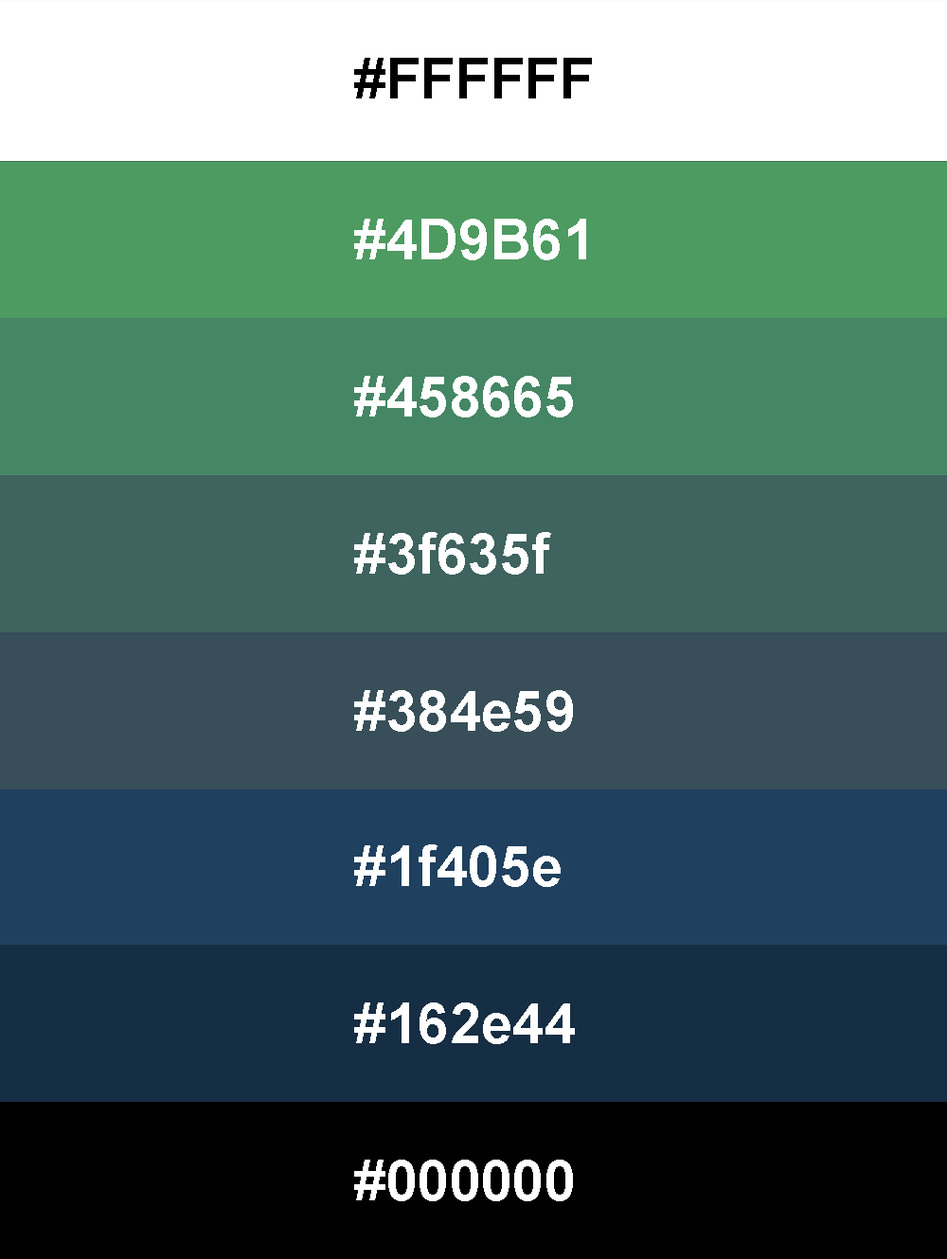
<style>
.page{position:relative;width:947px;height:1259px}
.page>*{position:absolute;margin:0}
.t1{font:56.8px "Arial-BoldMT";color:#000000}
.t2{font:56.8px "Arial-BoldMT";color:#ffffff}
</style>
<div class="page">
<p class="t1" style="left:354px;top:58px;width:238px;height:40px">#FFFFFF</p>
<p class="t2" style="left:354px;top:219px;width:232px;height:41px">#4D9B61</p>
<p class="t2" style="left:354px;top:376px;width:219px;height:42px">#458665</p>
<p class="t2" style="left:354px;top:532px;width:197px;height:43px">#3f635f</p>
<p class="t2" style="left:354px;top:690px;width:219px;height:42px">#384e59</p>
<p class="t2" style="left:354px;top:845px;width:207px;height:42px">#1f405e</p>
<p class="t2" style="left:354px;top:1003px;width:221px;height:41px">#162e44</p>
<p class="t2" style="left:354px;top:1160px;width:219px;height:42px">#000000</p>
</div>
